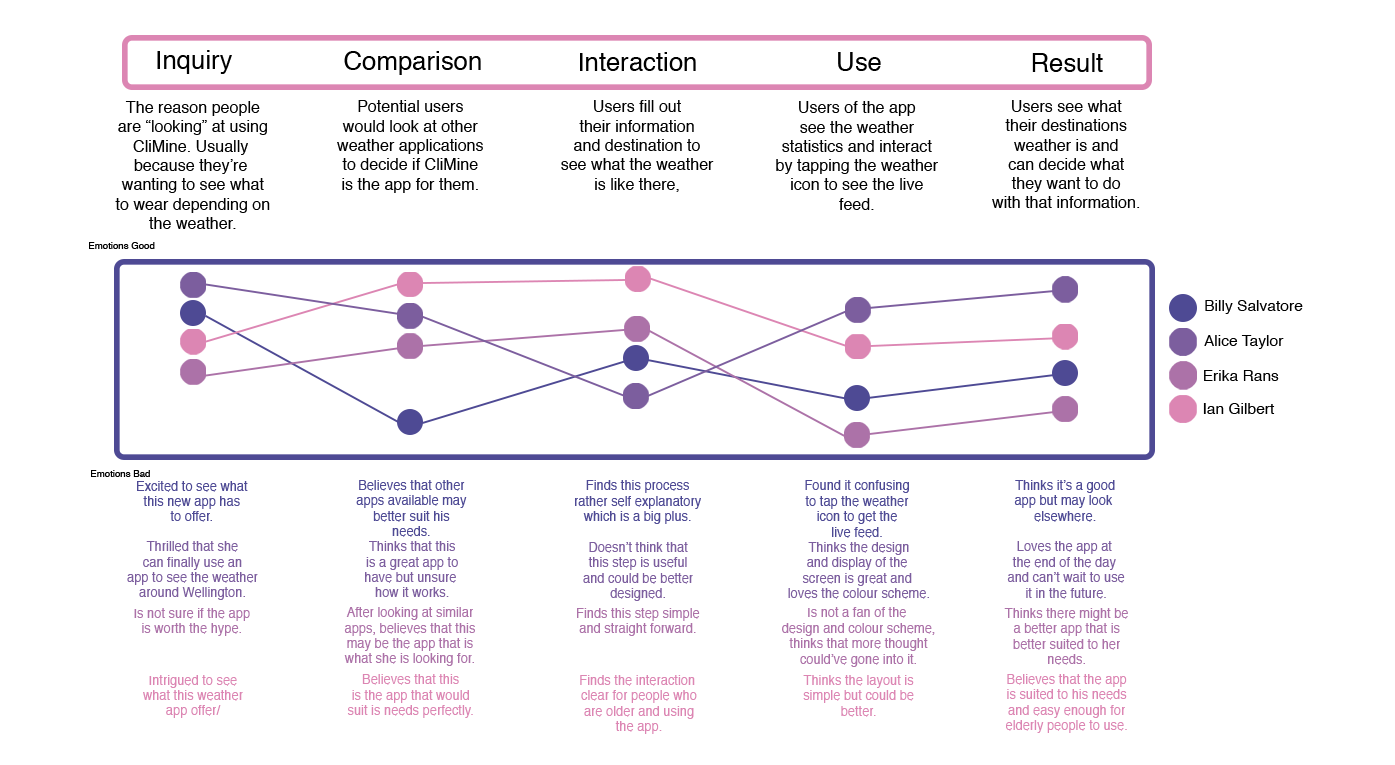
<style>
.page{position:relative;width:1395px;height:765px;background:#ffffff}
.page>*{position:absolute;margin:0}
.t1{font:25.7px "Helvetica";color:#000000}
.t2{font:16.1px "Helvetica";color:#000000}
.t3{font:9.6px "Helvetica";color:#000000}
.t4{font:15.6px "Helvetica";color:#000000}
.t5{font:12.9px "Helvetica";color:#4e4a94}
.t6{font:12.9px "Helvetica";color:#7c5e9e}
.t7{font:12.9px "Helvetica";color:#ac72a8}
.t8{font:12.9px "Helvetica";color:#dc86b3}
</style>
<div class="page">
<p class="t1" style="left:157px;top:50px;width:75px;height:24px">Inquiry</p>
<p class="t1" style="left:344px;top:51px;width:137px;height:24px">Comparison</p>
<p class="t1" style="left:580px;top:52px;width:116px;height:19px">Interaction</p>
<p class="t1" style="left:838px;top:52px;width:43px;height:19px">Use</p>
<p class="t1" style="left:1032px;top:53px;width:71px;height:19px">Result</p>
<p class="t2" style="left:115px;top:101px;width:155px;height:128px;text-align:center">The reason people<br>are “looking” at using<br>CliMine. Usually <br>because they’re <br>wanting to see what<br>to wear depending on<br>the weather.</p>
<p class="t2" style="left:337px;top:100px;width:146px;height:93px;text-align:center">Potential users<br>would look at other<br>weather applications<br>to decide if CliMine<br>is the app for them.</p>
<p class="t2" style="left:561px;top:100px;width:153px;height:92px;text-align:center">Users fill out<br>their information<br>and destination to<br>see what the weather<br>is like there,</p>
<p class="t2" style="left:776px;top:101px;width:162px;height:109px;text-align:center">Users of the app<br>see the weather<br>statistics and interact<br>by tapping the weather<br>icon to see the live<br>feed.</p>
<p class="t2" style="left:992px;top:100px;width:148px;height:108px;text-align:center">Users see what<br>their destinations<br>weather is and<br>can decide what<br>they want to do<br>with that information.</p>
<p class="t3" style="left:89px;top:242px;width:66px;height:7px">Emotions Good</p>
<p class="t4" style="left:1205px;top:300px;width:98px;height:14px">Billy Salvatore</p>
<p class="t4" style="left:1204px;top:335px;width:80px;height:14px">Alice Taylor</p>
<p class="t4" style="left:1204px;top:370px;width:75px;height:11px">Erika Rans</p>
<p class="t4" style="left:1203px;top:403px;width:72px;height:11px">Ian Gilbert</p>
<p class="t3" style="left:91px;top:470px;width:59px;height:7px">Emotions Bad</p>
<p class="t5" style="left:137px;top:481px;width:111px;height:41px;text-align:center">Excited to see what<br>this new app has<br>to offer.</p>
<p class="t5" style="left:356px;top:480px;width:111px;height:57px;text-align:center">Believes that other<br>apps available may<br>better suit his<br>needs.</p>
<p class="t5" style="left:575px;top:480px;width:126px;height:44px;text-align:center">Finds this process<br>rather self explanatory<br>which is a big plus.</p>
<p class="t5" style="left:805px;top:480px;width:104px;height:58px;text-align:center">Found it confusing<br>to tap the weather<br>icon to get the<br>live feed.</p>
<p class="t5" style="left:1014px;top:480px;width:101px;height:42px;text-align:center">Thinks it’s a good<br>app but may look <br>elsewhere.</p>
<p class="t6" style="left:127px;top:541px;width:131px;height:59px;text-align:center">Thrilled that she<br>can finally use an<br>app to see the weather<br>around Wellington.</p>
<p class="t6" style="left:365px;top:541px;width:93px;height:56px;text-align:center">Thinks that this<br>is a great app to<br>have but unsure <br>how it works.</p>
<p class="t6" style="left:583px;top:542px;width:110px;height:59px;text-align:center">Doesn’t think that<br>this step is useful<br>and could be better<br>designed.</p>
<p class="t6" style="left:788px;top:542px;width:141px;height:57px;text-align:center">Thinks the design<br>and display of the <br>screen is great and <br>loves the colour scheme.</p>
<p class="t6" style="left:1007px;top:541px;width:118px;height:58px;text-align:center">Loves the app at <br>the end of the day <br>and can’t wait to use<br>it in the future.</p>
<p class="t7" style="left:134px;top:608px;width:116px;height:28px;text-align:center">Is not sure if the app<br>is worth the hype.</p>
<p class="t7" style="left:344px;top:607px;width:131px;height:59px;text-align:center">After looking at similar<br>apps, believes that this<br>may be the app that is<br>what she is looking for.</p>
<p class="t7" style="left:577px;top:608px;width:123px;height:28px;text-align:center">Finds this step simple<br>and straight forward.</p>
<p class="t7" style="left:782px;top:607px;width:153px;height:60px;text-align:center">Is not a fan of the <br>design and colour scheme,<br>thinks that more thought<br>could’ve gone into it.</p>
<p class="t7" style="left:1004px;top:608px;width:124px;height:57px;text-align:center">Thinks there might be<br>a better app that is<br>better suited to her<br>needs.</p>
<p class="t8" style="left:143px;top:675px;width:100px;height:43px;text-align:center">Intrigued to see<br>what this weather<br>app offer/</p>
<p class="t8" style="left:347px;top:674px;width:126px;height:44px;text-align:center">Believes that this<br>is the app that would<br>suit is needs perfectly.</p>
<p class="t8" style="left:580px;top:675px;width:117px;height:59px;text-align:center">Finds the interaction <br>clear for people who<br>are older and using<br>the app.</p>
<p class="t8" style="left:803px;top:675px;width:111px;height:42px;text-align:center">Thinks the layout is<br>simple but could be<br>better.</p>
<p class="t8" style="left:1006px;top:674px;width:121px;height:59px;text-align:center">Believes that the app<br>is suited to his needs<br>and easy enough for<br>elderly people to use.</p>
</div>
